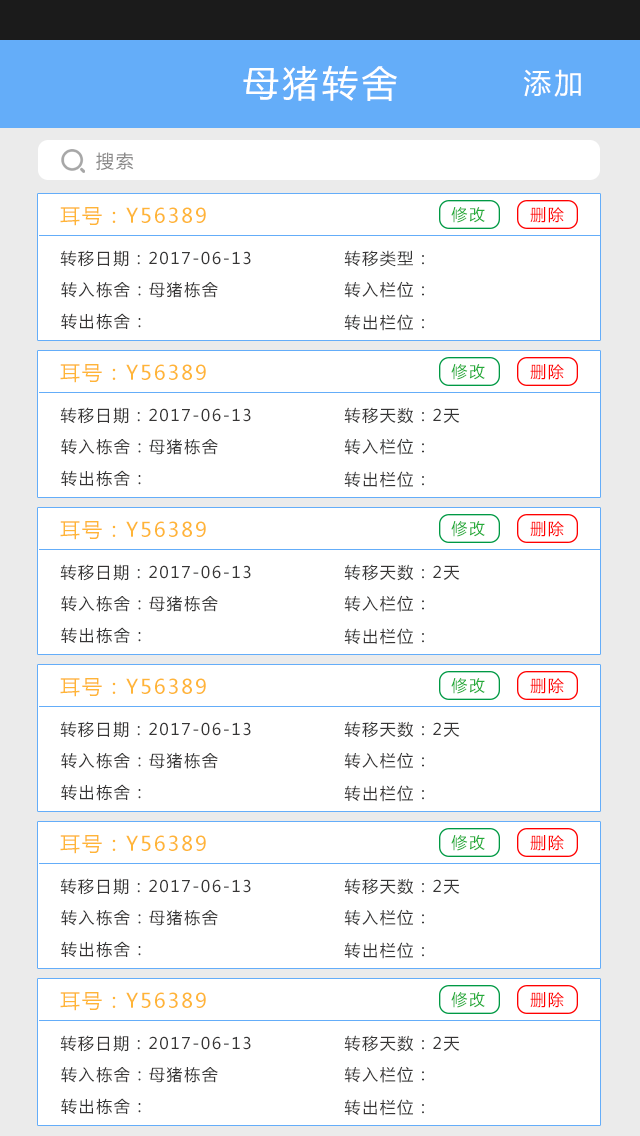
<style>
.page{position:relative;width:640px;height:1136px;background:#ffffff}
.page>*{position:absolute;margin:0}
.t1{font:36px "MicrosoftYaHei";letter-spacing:0.1em;color:#ffffff}
.t2{font:28px "MicrosoftYaHei";letter-spacing:0.1em;color:#ffffff}
.t3{font:18px "MicrosoftYaHei";letter-spacing:0.1em;color:#8a8989}
.t4{font:20px "MicrosoftYaHei";letter-spacing:0.1em;color:#ffb537}
.t5{font:16px "MicrosoftYaHei";letter-spacing:0.1em;color:#22ac38}
.t6{font:16px "MicrosoftYaHei";letter-spacing:0.1em;color:#ff0000}
.t7{font:16px "MicrosoftYaHei";letter-spacing:0.1em;color:#363535}
</style>
<div class="page">
<p class="t1" style="left:243px;top:65px;width:154px;height:36px">母猪转舍</p>
<p class="t2" style="left:523px;top:69px;width:58px;height:28px">添加</p>
<p class="t3" style="left:96px;top:152px;width:38px;height:18px">搜索</p>
<p class="t4" style="left:60px;top:207px;width:146px;height:19px">耳号：Y56389</p>
<p class="t5" style="left:451px;top:207px;width:34px;height:16px">修改</p>
<p class="t6" style="left:530px;top:207px;width:34px;height:16px">删除</p>
<p class="t7" style="left:60px;top:250px;width:191px;height:17px">转移日期：2017-06-13</p>
<p class="t7" style="left:344px;top:250px;width:80px;height:17px">转移类型：</p>
<p class="t7" style="left:61px;top:281px;width:157px;height:17px">转入栋舍：母猪栋舍</p>
<p class="t7" style="left:344px;top:281px;width:80px;height:17px">转入栏位：</p>
<p class="t7" style="left:61px;top:313px;width:80px;height:17px">转出栋舍：</p>
<p class="t7" style="left:344px;top:314px;width:80px;height:17px">转出栏位：</p>
<p class="t4" style="left:60px;top:364px;width:146px;height:19px">耳号：Y56389</p>
<p class="t5" style="left:451px;top:364px;width:34px;height:16px">修改</p>
<p class="t6" style="left:530px;top:364px;width:34px;height:16px">删除</p>
<p class="t7" style="left:60px;top:407px;width:191px;height:17px">转移日期：2017-06-13</p>
<p class="t7" style="left:344px;top:407px;width:116px;height:17px">转移天数：2天</p>
<p class="t7" style="left:61px;top:438px;width:157px;height:17px">转入栋舍：母猪栋舍</p>
<p class="t7" style="left:344px;top:438px;width:80px;height:17px">转入栏位：</p>
<p class="t7" style="left:61px;top:470px;width:80px;height:17px">转出栋舍：</p>
<p class="t7" style="left:344px;top:471px;width:80px;height:17px">转出栏位：</p>
<p class="t4" style="left:60px;top:521px;width:146px;height:19px">耳号：Y56389</p>
<p class="t5" style="left:451px;top:521px;width:34px;height:16px">修改</p>
<p class="t6" style="left:530px;top:521px;width:34px;height:16px">删除</p>
<p class="t7" style="left:60px;top:564px;width:191px;height:17px">转移日期：2017-06-13</p>
<p class="t7" style="left:344px;top:564px;width:116px;height:17px">转移天数：2天</p>
<p class="t7" style="left:61px;top:595px;width:157px;height:17px">转入栋舍：母猪栋舍</p>
<p class="t7" style="left:344px;top:595px;width:80px;height:17px">转入栏位：</p>
<p class="t7" style="left:61px;top:627px;width:80px;height:17px">转出栋舍：</p>
<p class="t7" style="left:344px;top:628px;width:80px;height:17px">转出栏位：</p>
<p class="t4" style="left:60px;top:678px;width:146px;height:19px">耳号：Y56389</p>
<p class="t5" style="left:451px;top:678px;width:34px;height:16px">修改</p>
<p class="t6" style="left:530px;top:678px;width:34px;height:16px">删除</p>
<p class="t7" style="left:60px;top:721px;width:191px;height:17px">转移日期：2017-06-13</p>
<p class="t7" style="left:344px;top:721px;width:116px;height:17px">转移天数：2天</p>
<p class="t7" style="left:61px;top:752px;width:157px;height:17px">转入栋舍：母猪栋舍</p>
<p class="t7" style="left:344px;top:752px;width:80px;height:17px">转入栏位：</p>
<p class="t7" style="left:61px;top:784px;width:80px;height:17px">转出栋舍：</p>
<p class="t7" style="left:344px;top:785px;width:80px;height:17px">转出栏位：</p>
<p class="t4" style="left:60px;top:835px;width:146px;height:19px">耳号：Y56389</p>
<p class="t5" style="left:451px;top:835px;width:34px;height:16px">修改</p>
<p class="t6" style="left:530px;top:835px;width:34px;height:16px">删除</p>
<p class="t7" style="left:60px;top:878px;width:191px;height:17px">转移日期：2017-06-13</p>
<p class="t7" style="left:344px;top:878px;width:116px;height:17px">转移天数：2天</p>
<p class="t7" style="left:61px;top:909px;width:157px;height:17px">转入栋舍：母猪栋舍</p>
<p class="t7" style="left:344px;top:909px;width:80px;height:17px">转入栏位：</p>
<p class="t7" style="left:61px;top:941px;width:80px;height:17px">转出栋舍：</p>
<p class="t7" style="left:344px;top:942px;width:80px;height:17px">转出栏位：</p>
<p class="t4" style="left:60px;top:992px;width:146px;height:19px">耳号：Y56389</p>
<p class="t5" style="left:451px;top:992px;width:34px;height:16px">修改</p>
<p class="t6" style="left:530px;top:992px;width:34px;height:16px">删除</p>
<p class="t7" style="left:60px;top:1035px;width:191px;height:17px">转移日期：2017-06-13</p>
<p class="t7" style="left:344px;top:1035px;width:116px;height:17px">转移天数：2天</p>
<p class="t7" style="left:61px;top:1066px;width:157px;height:17px">转入栋舍：母猪栋舍</p>
<p class="t7" style="left:344px;top:1066px;width:80px;height:17px">转入栏位：</p>
<p class="t7" style="left:61px;top:1098px;width:80px;height:17px">转出栋舍：</p>
<p class="t7" style="left:344px;top:1099px;width:80px;height:17px">转出栏位：</p>
</div>
